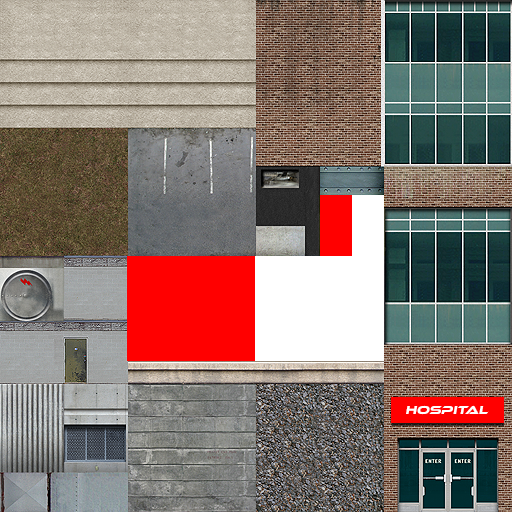
<style>
.page{position:relative;width:512px;height:512px}
.page>*{position:absolute;margin:0}
.t1{font:12px "EthnocentricRg-Regular";color:#ffffff;font-style:italic}
</style>
<div class="page">
<p class="t1" style="left:406px;top:405px;width:83px;height:10px">hospital</p>
</div>
